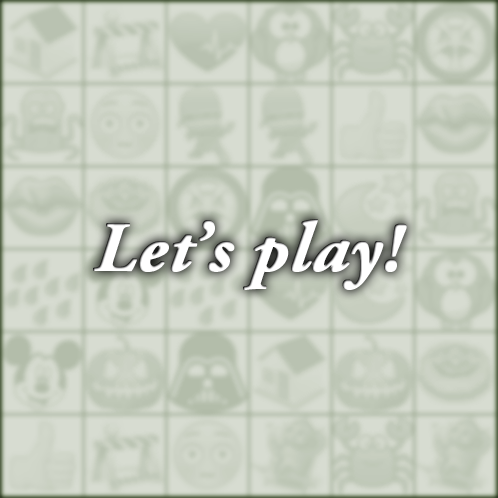
<style>
.page{position:relative;width:498px;height:498px}
.page>*{position:absolute;margin:0}
.t1{font:71.7px "AGaramondPro-BoldItalic";color:#fefefe;font-weight:bold}
</style>
<div class="page">
<p class="t1" style="left:93px;top:219px;width:314px;height:71px">Let’s play!</p>
</div>
